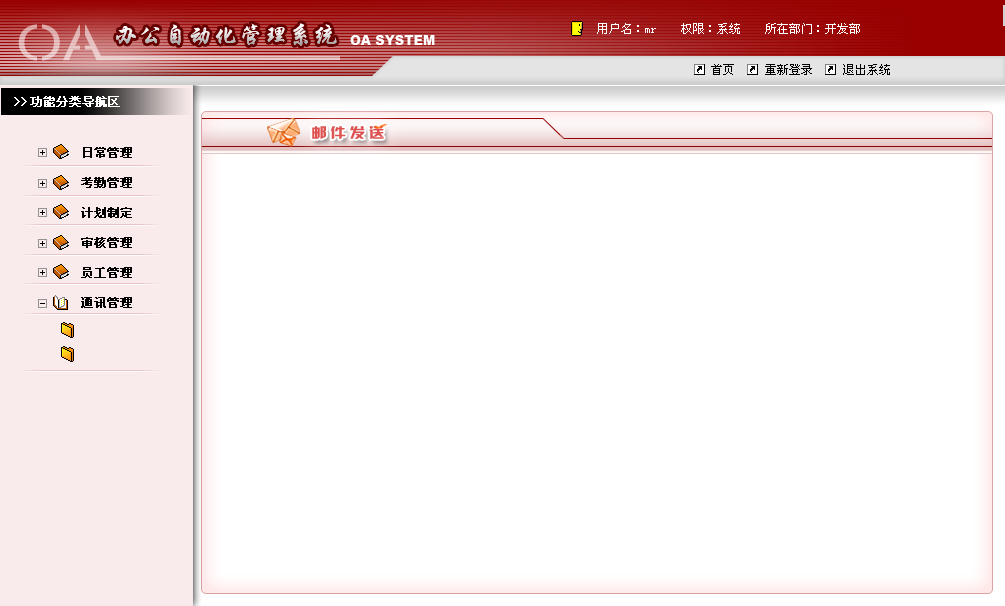
<style>
.page{position:relative;width:1005px;height:606px;background:#ffffff}
.page>*{position:absolute;margin:0}
.t1{font:12px "SimSun";color:#ffffff}
.t2{font:13px "Arial-Black";color:#ffffff}
.t3{font:12px "SimSun";color:#000000}
.t4{font:12px "SimSun";color:#ffffff;font-weight:bold}
.t5{font:14px "HYk2gj";letter-spacing:0.22em;color:#dd5151;scale:1.12 1}
.t6{font:12px/30px "SimSun";color:#000000;font-weight:bold}
</style>
<div class="page">
<p class="t1" style="left:597px;top:23px;width:263px;height:11px">用户名：mr    权限：系统    所在部门：开发部</p>
<p class="t2" style="left:350px;top:35px;width:85px;height:10px">OA SYSTEM</p>
<p class="t3" style="left:711px;top:64px;width:179px;height:11px">首页     重新登录     退出系统</p>
<p class="t4" style="left:14px;top:96px;width:106px;height:11px">&gt;&gt;功能分类导航区</p>
<p class="t5" style="left:312px;top:126px;width:72px;height:14px">邮件发送</p>
<p class="t6" style="left:81px;top:147px;width:51px;height:161px">日常管理<br>考勤管理<br>计划制定<br>审核管理<br>员工管理<br>通讯管理</p>
</div>
